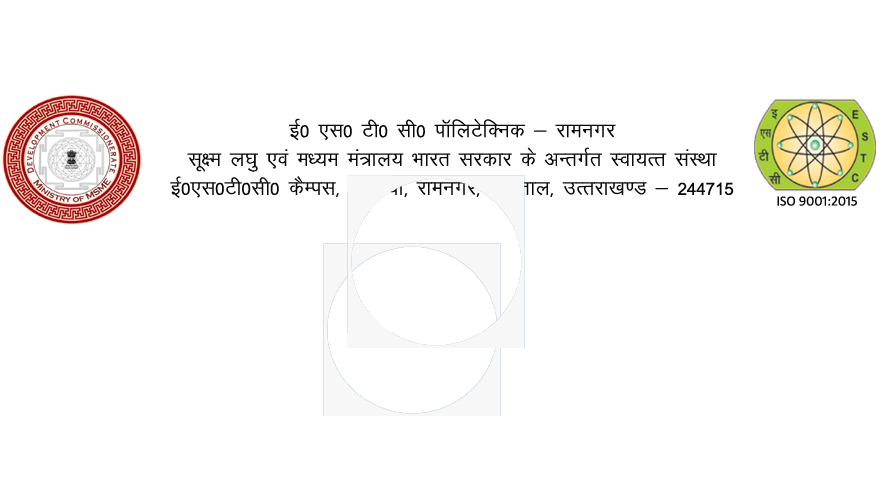
<style>
.page{position:relative;width:885px;height:485px;background:#ffffff}
.page>*{position:absolute;margin:0}
.t1{font:24px "KrutiDev010";color:#080808}
.t2{font:14px "Calibri";color:#080808}
</style>
<div class="page">
<p class="t1" style="left:170px;top:118px;width:564px;height:80px;text-align:center">bZ0 ,l0 Vh0 lh0 ikWfyVsfDud &amp; jkeuxj<br>lw{e y?kq ,oa e/;e ea=ky; Hkkjr ljdkj ds vUrxZr Lok;Rr laLFkk<br>bZ0,l0Vh0Lkh0 dSEil] dkfu;k¡] jkeuxj] uSuhrky] mRrjk[k.M &amp; 244715</p>
<p class="t2" style="left:777px;top:196px;width:80px;height:10px">ISO 9001:2015</p>
</div>
